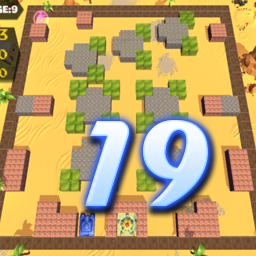
<style>
.page{position:relative;width:256px;height:256px}
.page>*{position:absolute;margin:0}
.t1{font:123.9px "Magneto-Bold";letter-spacing:0.02em;scale:0.94 1}
</style>
<div class="page">
<p class="t1" style="left:85px;top:120px;width:123px;height:86px">19</p>
</div>
